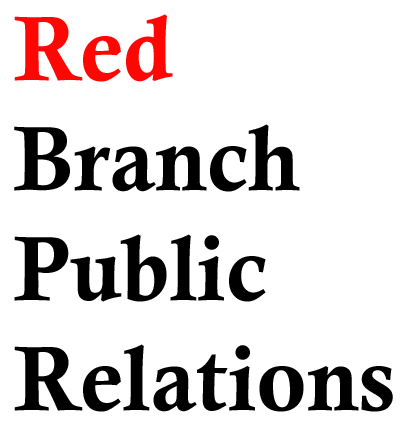
<style>
.page{position:relative;width:407px;height:426px;background:#ffffff}
.page>*{position:absolute;margin:0}
.t1{font:91.7px "CalisMTBol";color:#000000}
.t2{font:91.7px "CalisMTBol";color:#ff0604}
</style>
<div class="page">
<p class="t1" style="left:14px;top:14px;width:379px;height:398px"><span class="t2">Red<br></span>Branch<br>Public<br>Relations</p>
</div>
